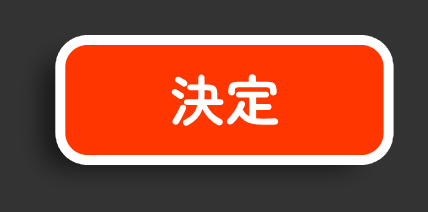
<style>
.page{position:relative;width:428px;height:212px;background:#333333}
.page>*{position:absolute;margin:0}
.t1{font:55px "ZenMaruGothic-Bold";color:#ffffff}
</style>
<div class="page">
<p class="t1" style="left:171px;top:74px;width:107px;height:52px">決定</p>
</div>
